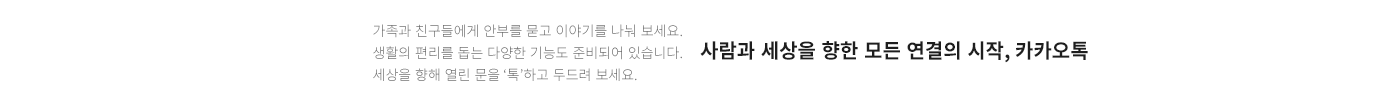
<style>
.page{position:relative;width:1400px;height:106px;background:#ffffff}
.page>*{position:absolute;margin:0}
.t1{font:14px/22px "NotoSansKR-Light"}
.t2{font:20px "NotoSansKR-Bold";color:#1e1e1e}
</style>
<div class="page">
<p class="t1" style="left:373px;top:24px;width:309px;height:57px">가족과 친구들에게 안부를 묻고 이야기를 나눠 보세요. <br>생활의 편리를 돕는 다양한 기능도 준비되어 있습니다.<br>세상을 향해 열린 문을 ‘톡’하고 두드려 보세요.</p>
<p class="t2" style="left:700px;top:41px;width:388px;height:22px">사람과 세상을 향한 모든 연결의 시작, 카카오톡</p>
</div>
